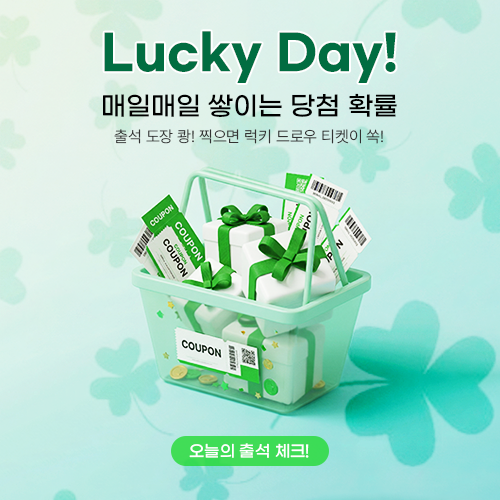
<style>
.page{position:relative;width:500px;height:500px}
.page>*{position:absolute;margin:0}
.t1{font:47.7px "GmarketSansBold";color:#016d41}
.t2{font:26px "GmarketSansMedium";color:#000000}
.t3{font:16px "Pretendard-Light";color:#333333}
.t4{font:16px "GmarketSansMedium";color:#ffffff}
</style>
<div class="page">
<p class="t1" style="left:104px;top:31px;width:292px;height:52px">Lucky Day!</p>
<p class="t2" style="left:103px;top:93px;width:294px;height:24px">매일매일 쌓이는 당첨 확률</p>
<p class="t3" style="left:114px;top:129px;width:269px;height:15px">출석 도장 쾅! 찍으면 럭키 드로우 티켓이 쏙!</p>
<p class="t4" style="left:189px;top:443px;width:120px;height:15px">오늘의 출석 체크!</p>
</div>
